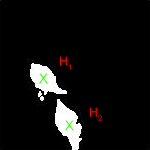
<style>
.page{position:relative;width:150px;height:150px;background:#000000}
.page>*{position:absolute;margin:0}
.t1{font:12px "ArialMT";letter-spacing:0.05em;color:#ff0000}
.t2{font:24px "ArialMT";letter-spacing:0.05em;color:#42ff00}
</style>
<div class="page">
<p class="t1" style="left:60px;top:56px;width:11px;height:14px">H1</p>
<p class="t2" style="left:38px;top:73px;width:10px;height:11px">X</p>
<p class="t1" style="left:90px;top:107px;width:12px;height:14px">H2</p>
<p class="t2" style="left:64px;top:120px;width:10px;height:11px">X</p>
</div>
